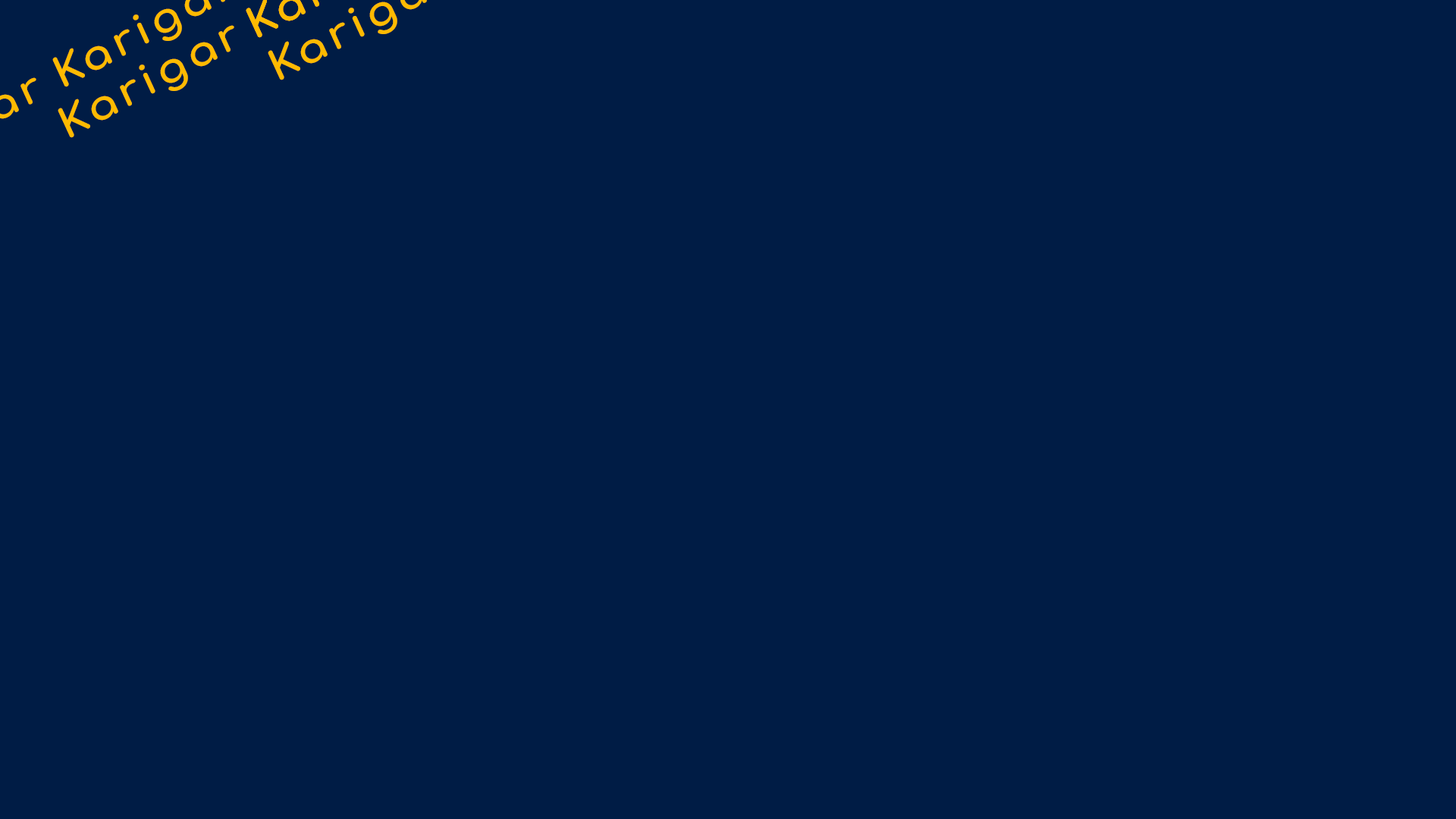
<style>
.page{position:relative;width:1456px;height:819px;background:#001c45}
.page>*{position:absolute;margin:0}
.t1{font:40.3px "Comfortaa-Bold";letter-spacing:0.1em;color:#ffba00;scale:1.1 1}
</style>
<div class="page">
<p class="t1" style="left:58px;top:25px;width:176px;height:113px;rotate:-28deg">Karigar</p>
</div>
